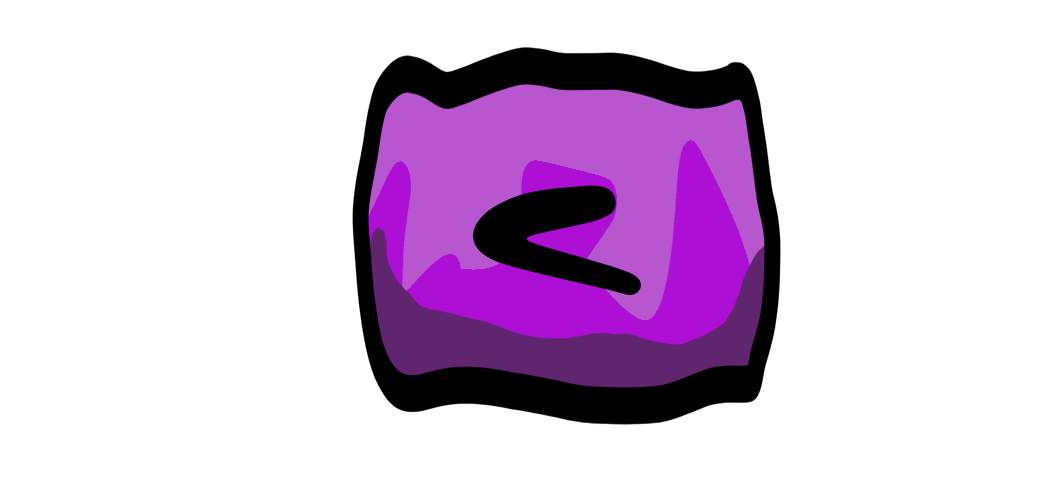
<style>
.page{position:relative;width:1056px;height:477px;background:#ffffff}
.page>*{position:absolute;margin:0}
.t1{font:200px "Pineapple-Days";color:#000000}
</style>
<div class="page">
<p class="t1" style="left:473px;top:185px;width:168px;height:110px;rotate:90deg">v</p>
</div>
